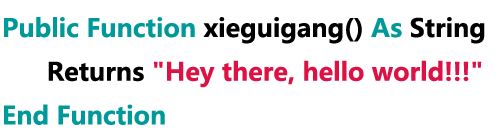
<style>
.page{position:relative;width:500px;height:138px;background:#ffffff}
.page>*{position:absolute;margin:0}
.t1{font:25px "MicrosoftYaHei-Bold";color:#dd1144}
.t2{font:25px "MicrosoftYaHei-Bold";color:#009999}
.t3{font:25px "MicrosoftYaHei-Bold";color:#000000}
</style>
<div class="page">
<p class="t1" style="left:4px;top:17px;width:481px;height:108px"><span class="t2">Public Function</span><span class="t3"> xieguigang() </span><span class="t2">As</span><span class="t3"> String<br>      Returns </span>"Hey there, hello world!!!"<br><span class="t2">End Function</span></p>
</div>
